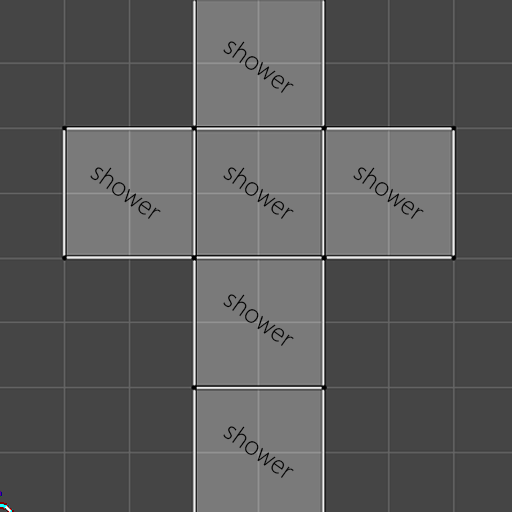
<style>
.page{position:relative;width:512px;height:512px;background:#454545}
.page>*{position:absolute;margin:0}
.t1{font:24px "MicrosoftYaHeiUILight";letter-spacing:0.01em;color:#000000}
</style>
<div class="page">
<p class="t1" style="left:223px;top:41px;width:71px;height:52px;rotate:36deg">shower</p>
<p class="t1" style="left:90px;top:167px;width:71px;height:52px;rotate:36deg">shower</p>
<p class="t1" style="left:223px;top:167px;width:71px;height:52px;rotate:36deg">shower</p>
<p class="t1" style="left:353px;top:167px;width:71px;height:52px;rotate:36deg">shower</p>
<p class="t1" style="left:223px;top:294px;width:71px;height:52px;rotate:36deg">shower</p>
<p class="t1" style="left:223px;top:426px;width:71px;height:52px;rotate:36deg">shower</p>
</div>
